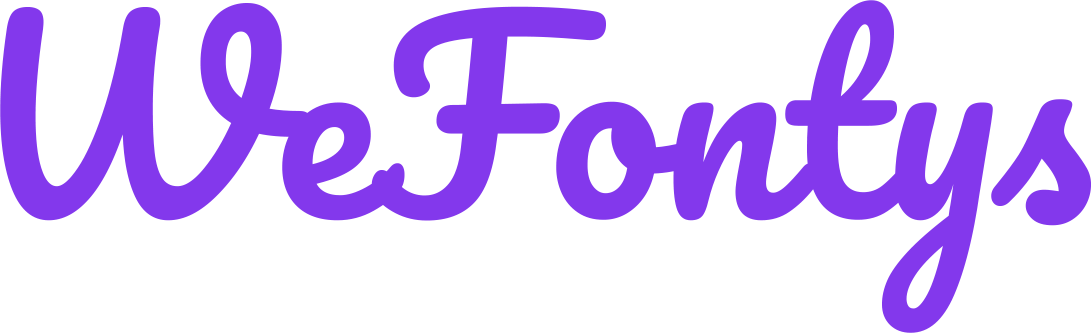
<style>
.page{position:relative;width:1091px;height:333px;background:#ffffff}
.page>*{position:absolute;margin:0}
.t1{font:250px "Pacifico-Regular";color:#8338ec}
</style>
<div class="page">
<p class="t1" style="left:0px;top:0px;width:1091px;height:333px">WeFontys</p>
</div>
